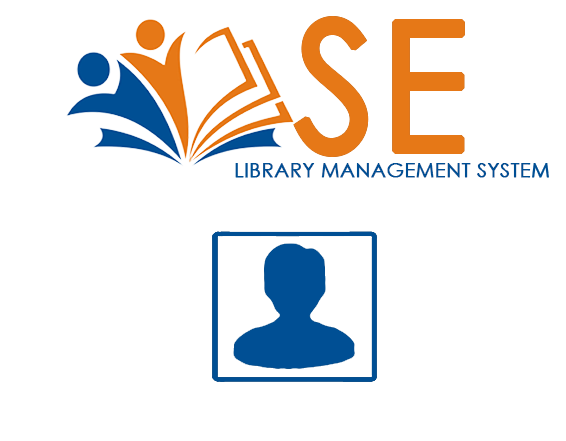
<style>
.page{position:relative;width:566px;height:441px;background:#ffffff}
.page>*{position:absolute;margin:0}
.t1{font:20px "CenturyGothic";letter-spacing:0.005em;color:#004f94;text-transform:uppercase;font-weight:bold}
</style>
<div class="page">
<p class="t1" style="left:235px;top:163px;width:314px;height:15px">library management system</p>
</div>
